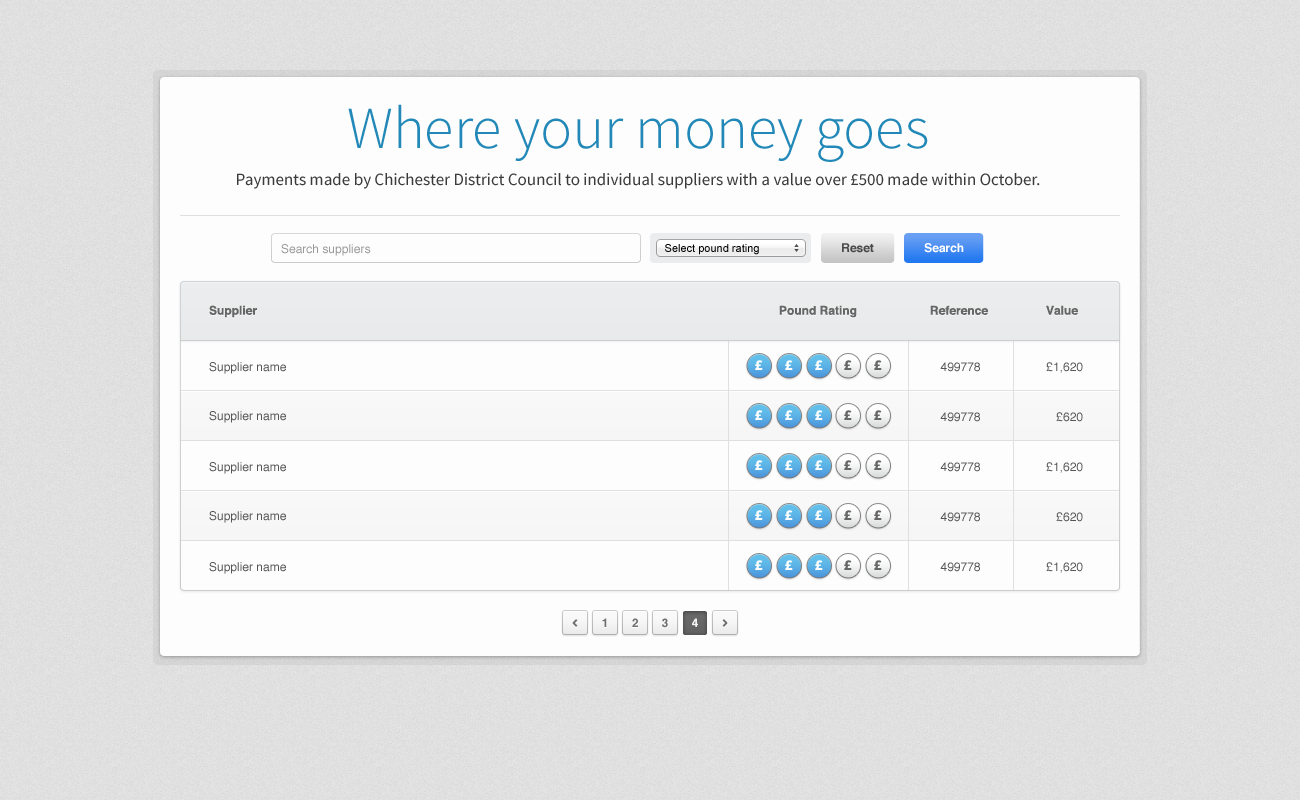
<style>
.page{position:relative;width:1300px;height:800px;background:#fdfdfd}
.page>*{position:absolute;margin:0}
.t1{font:60px "SourceSansPro-Light";color:#2288b7}
.t2{font:17px "SourceSansPro-Regular";color:#3b3b3b}
.t3{font:12px "Helvetica";color:#999999}
.t4{font:11px "ArialMT";color:#000000}
.t5{font:12px "Helvetica-Bold";color:#494949}
.t6{font:12px "Helvetica-Bold";color:#fdfdfd}
.t7{font:12px "Helvetica-Bold";color:#666666}
.t8{font:12px "Helvetica";color:#555555}
.t9{font:15px "SourceSansPro-Black";color:#fdfdfd}
.t10{font:15px "SourceSansPro-Black";color:#666666}
.t11{font:12px "Helvetica-Bold";color:#717171}
.t12{font:12px "Helvetica-Bold";color:#f2f2f2}
</style>
<div class="page">
<p class="t1" style="left:348px;top:104px;width:580px;height:58px">Where your money goes</p>
<p class="t2" style="left:237px;top:173px;width:803px;height:16px">Payments made by Chichester District Council to individual suppliers with a value over £500 made within October.</p>
<p class="t3" style="left:281px;top:244px;width:90px;height:12px">Search suppliers</p>
<p class="t4" style="left:665px;top:244px;width:94px;height:11px">Select pound rating</p>
<p class="t5" style="left:842px;top:243px;width:32px;height:10px">Reset</p>
<p class="t6" style="left:924px;top:243px;width:40px;height:10px">Search</p>
<p class="t7" style="left:209px;top:305px;width:48px;height:13px">Supplier</p>
<p class="t7" style="left:779px;top:305px;width:78px;height:13px">Pound Rating</p>
<p class="t7" style="left:930px;top:305px;width:58px;height:10px">Reference</p>
<p class="t7" style="left:1046px;top:305px;width:32px;height:10px">Value</p>
<p class="t8" style="left:209px;top:362px;width:77px;height:12px">Supplier name</p>
<p class="t9" style="left:755px;top:360px;width:8px;height:10px">£</p>
<p class="t9" style="left:785px;top:360px;width:8px;height:10px">£</p>
<p class="t9" style="left:815px;top:360px;width:8px;height:10px">£</p>
<p class="t10" style="left:844px;top:360px;width:8px;height:10px">£</p>
<p class="t10" style="left:874px;top:360px;width:8px;height:10px">£</p>
<p class="t8" style="left:940px;top:362px;width:40px;height:10px">499778</p>
<p class="t8" style="left:1046px;top:362px;width:37px;height:11px">£1,620</p>
<p class="t8" style="left:209px;top:411px;width:77px;height:12px">Supplier name</p>
<p class="t9" style="left:755px;top:410px;width:8px;height:10px">£</p>
<p class="t9" style="left:785px;top:410px;width:8px;height:10px">£</p>
<p class="t9" style="left:815px;top:410px;width:8px;height:10px">£</p>
<p class="t10" style="left:844px;top:410px;width:8px;height:10px">£</p>
<p class="t10" style="left:874px;top:410px;width:8px;height:10px">£</p>
<p class="t8" style="left:940px;top:412px;width:40px;height:10px">499778</p>
<p class="t8" style="left:1056px;top:412px;width:27px;height:10px">£620</p>
<p class="t8" style="left:209px;top:462px;width:77px;height:12px">Supplier name</p>
<p class="t9" style="left:755px;top:460px;width:8px;height:10px">£</p>
<p class="t9" style="left:785px;top:460px;width:8px;height:10px">£</p>
<p class="t9" style="left:815px;top:460px;width:8px;height:10px">£</p>
<p class="t10" style="left:844px;top:460px;width:8px;height:10px">£</p>
<p class="t10" style="left:874px;top:460px;width:8px;height:10px">£</p>
<p class="t8" style="left:940px;top:462px;width:40px;height:10px">499778</p>
<p class="t8" style="left:1046px;top:462px;width:37px;height:11px">£1,620</p>
<p class="t9" style="left:755px;top:510px;width:8px;height:10px">£</p>
<p class="t9" style="left:785px;top:510px;width:8px;height:10px">£</p>
<p class="t9" style="left:815px;top:510px;width:8px;height:10px">£</p>
<p class="t10" style="left:844px;top:510px;width:8px;height:10px">£</p>
<p class="t10" style="left:874px;top:510px;width:8px;height:10px">£</p>
<p class="t8" style="left:209px;top:511px;width:77px;height:12px">Supplier name</p>
<p class="t8" style="left:940px;top:512px;width:40px;height:10px">499778</p>
<p class="t8" style="left:1056px;top:512px;width:27px;height:10px">£620</p>
<p class="t8" style="left:209px;top:562px;width:77px;height:12px">Supplier name</p>
<p class="t9" style="left:755px;top:560px;width:8px;height:10px">£</p>
<p class="t9" style="left:785px;top:560px;width:8px;height:10px">£</p>
<p class="t9" style="left:815px;top:560px;width:8px;height:10px">£</p>
<p class="t10" style="left:844px;top:560px;width:8px;height:10px">£</p>
<p class="t10" style="left:874px;top:560px;width:8px;height:10px">£</p>
<p class="t8" style="left:940px;top:562px;width:40px;height:10px">499778</p>
<p class="t8" style="left:1046px;top:562px;width:37px;height:11px">£1,620</p>
<p class="t11" style="left:602px;top:618px;width:5px;height:9px">1</p>
<p class="t11" style="left:632px;top:618px;width:6px;height:9px">2</p>
<p class="t11" style="left:662px;top:618px;width:6px;height:10px">3</p>
<p class="t12" style="left:692px;top:618px;width:6px;height:9px">4</p>
</div>
